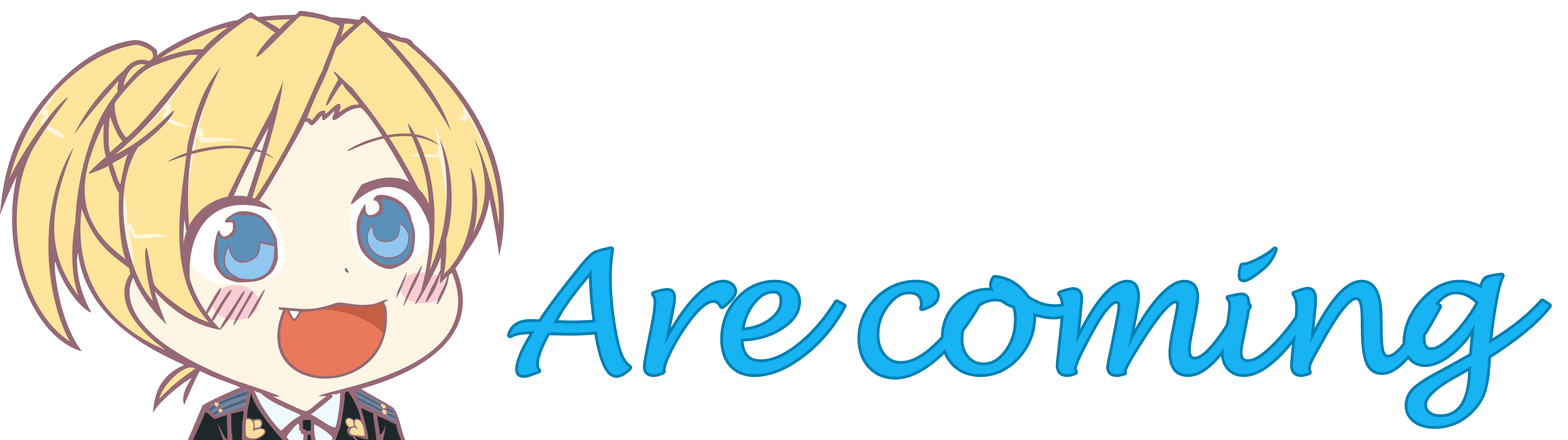
<style>
.page{position:relative;width:1568px;height:440px;background:#ffffff}
.page>*{position:absolute;margin:0}
.t1{font:165.4px "LucidaHandwriting-Italic";letter-spacing:-0.05em;color:#17b3f2}
</style>
<div class="page">
<p class="t1" style="left:510px;top:249px;width:1039px;height:177px">Are coming</p>
</div>
